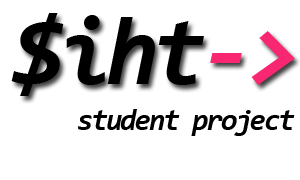
<style>
.page{position:relative;width:300px;height:180px;background:#ffffff}
.page>*{position:absolute;margin:0}
.t1{font:97.4px "Consolas-BoldItalic";letter-spacing:-0.07em;color:#000000}
.t2{font:97.4px "Consolas-BoldItalic";letter-spacing:-0.07em;color:#f92672}
.t3{font:30px "Consolas-BoldItalic";letter-spacing:-0.07em;color:#000000}
</style>
<div class="page">
<p class="t1" style="left:11px;top:13px;width:284px;height:83px">$iht<span class="t2">-&gt;</span></p>
<p class="t3" style="left:78px;top:109px;width:217px;height:27px">student project</p>
</div>
